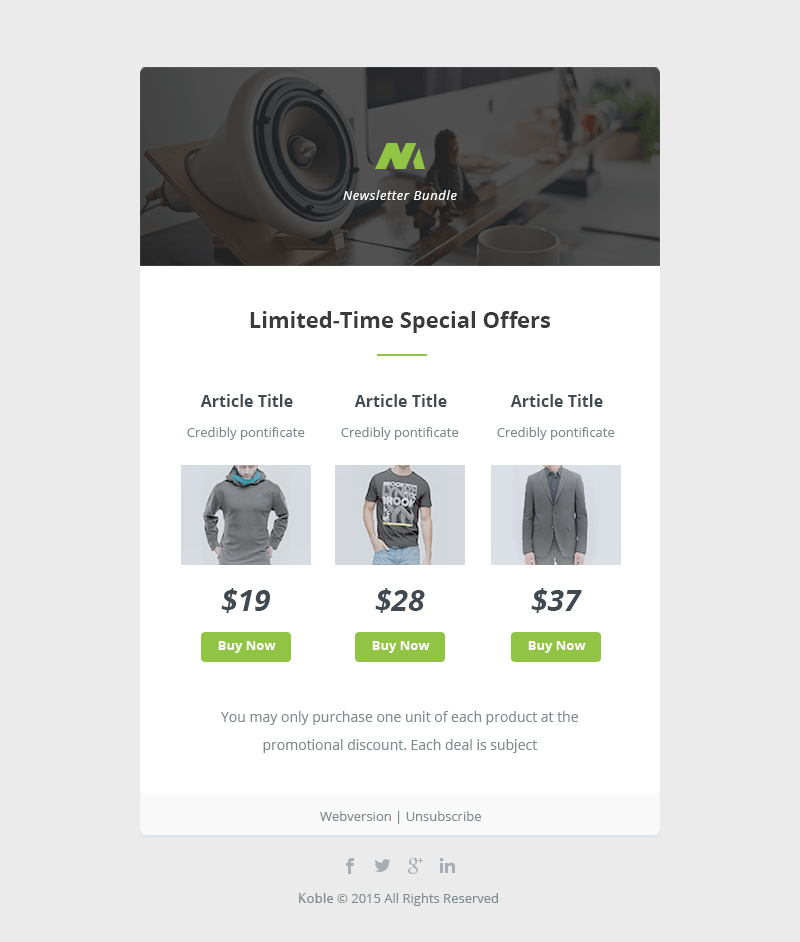
<style>
.page{position:relative;width:800px;height:942px;background:#ebebeb}
.page>*{position:absolute;margin:0}
.t1{font:13px "OpenSans-Italic";letter-spacing:0.05em;color:#ffffff}
.t2{font:22px "OpenSans-Bold";color:#3b3b3b}
.t3{font:16px "OpenSans-Bold";color:#414a51}
.t4{font:13px "OpenSans";color:#7f8c8d}
.t5{font:30px "OpenSans-BoldItalic";color:#414a51}
.t6{font:14px/28px "OpenSans";color:#7f8c8d}
.t7{font:13px "LucidaGrande";color:#7f8c8d}
</style>
<div class="page">
<p class="t1" style="left:343px;top:190px;width:114px;height:10px">Newsletter Bundle</p>
<p class="t2" style="left:250px;top:311px;width:301px;height:22px">Limited-Time Special Offers</p>
<p class="t3" style="left:200px;top:394px;width:93px;height:13px">Article Title</p>
<p class="t3" style="left:354px;top:394px;width:93px;height:13px">Article Title</p>
<p class="t3" style="left:510px;top:394px;width:93px;height:13px">Article Title</p>
<p class="t4" style="left:187px;top:427px;width:118px;height:13px">Credibly pontificate</p>
<p class="t4" style="left:341px;top:427px;width:118px;height:13px">Credibly pontificate</p>
<p class="t4" style="left:497px;top:427px;width:118px;height:13px">Credibly pontificate</p>
<p class="t5" style="left:221px;top:588px;width:49px;height:25px">$19</p>
<p class="t5" style="left:375px;top:588px;width:50px;height:25px">$28</p>
<p class="t5" style="left:531px;top:588px;width:51px;height:25px">$37</p>
<p class="t6" style="left:221px;top:711px;width:357px;height:42px;text-align:center">You may only purchase one unit of each product at the promotional discount. Each deal is subject</p>
<p class="t4" style="left:320px;top:811px;width:161px;height:13px">Webversion | Unsubscribe</p>
<p class="t4" style="left:299px;top:893px;width:199px;height:13px"><span class="t7">Koble</span> © 2015 All Rights Reserved</p>
</div>
